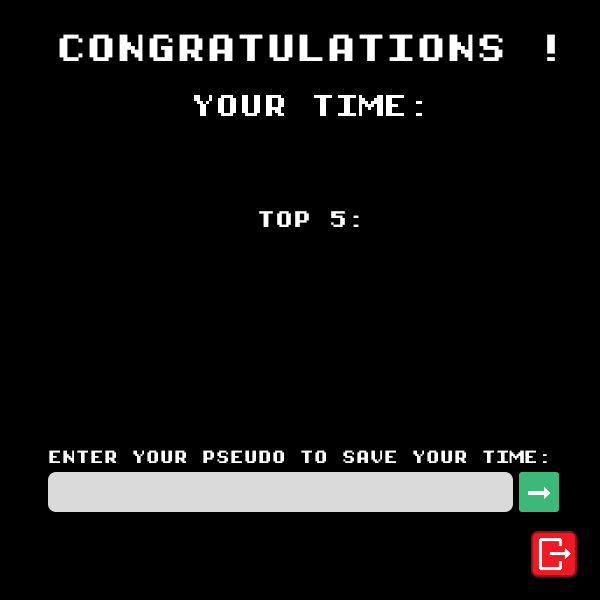
<style>
.page{position:relative;width:600px;height:600px;background:#000000}
.page>*{position:absolute;margin:0}
.t1{font:30px/18.5px "PixelOperatorMonoHB8";color:#ffffff;text-transform:uppercase}
.t2{font:24px/18.5px "PixelOperatorMonoHB8";color:#ffffff;text-transform:uppercase}
.t3{font:18px/18.5px "PixelOperatorMonoHB8";color:#ffffff;text-transform:uppercase}
.t4{font:14px "PixelOperatorMonoHB8";color:#ffffff;text-transform:uppercase}
</style>
<div class="page">
<p class="t1" style="left:59px;top:34px;width:496px;height:193px;text-align:center">CONGRATULATIONS !<br><span class="t2"><br><br>Your time:<br><br><br><br><br><br></span><span class="t3">TOP 5:</span></p>
<p class="t4" style="left:49px;top:450px;width:498px;height:13px">Enter your pseudo to save your time:</p>
</div>
